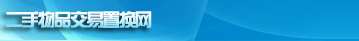
<style>
.page{position:relative;width:359px;height:41px}
.page>*{position:absolute;margin:0}
.t1{font:18px "FZZYJW--GB1-0";letter-spacing:-0.1em}
</style>
<div class="page">
<p class="t1" style="left:6px;top:11px;width:146px;height:17px">二手物品交易置换网</p>
</div>
